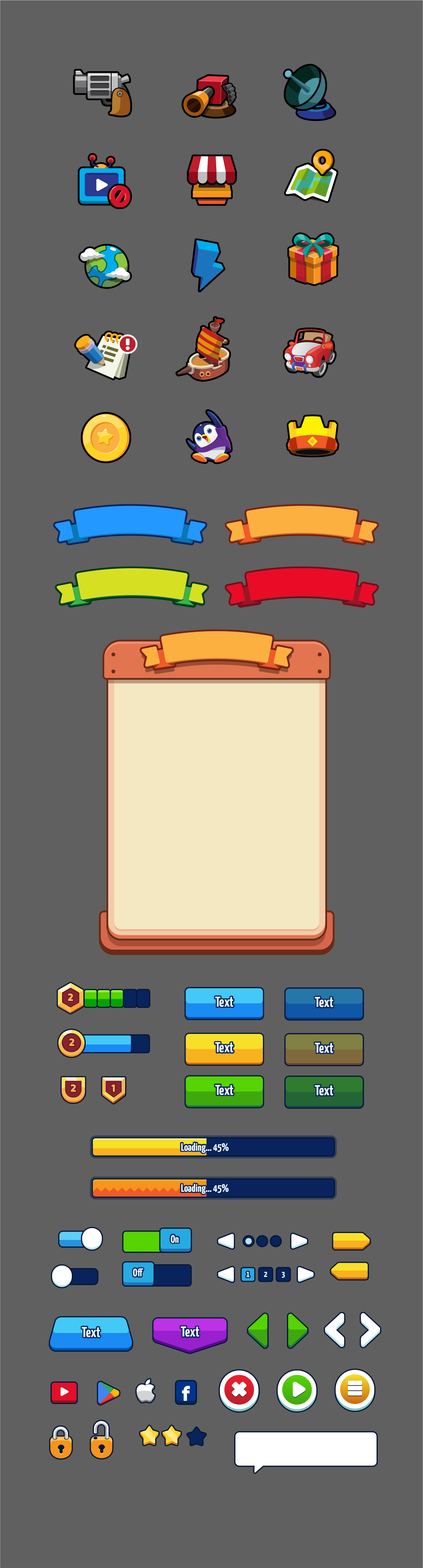
<style>
.page{position:relative;width:423px;height:1568px;background:#606060}
.page>*{position:absolute;margin:0}
.t1{font:10.7px "TiltWarp-Regular";color:#f3b854}
.t2{font:14.3px "YanoneKaffeesatz-Bold";color:#ebfaff}
.t3{font:14.3px "YanoneKaffeesatz-Bold";color:#ebfbff}
.t4{font:10.7px "YanoneKaffeesatz-Bold";color:#ebfaff}
.t5{font:10.7px "YanoneKaffeesatz-Bold";color:#ebfbff}
.t6{font:8.4px "YanoneKaffeesatz-Bold";color:#ebfaff}
.t7{font:8.4px "YanoneKaffeesatz-Bold";color:#ebfbff}
</style>
<div class="page">
<p class="t1" style="left:68px;top:993px;width:5px;height:8px">2</p>
<p class="t1" style="left:68px;top:993px;width:5px;height:8px">2</p>
<p class="t2" style="left:215px;top:996px;width:19px;height:11px">Text</p>
<p class="t3" style="left:215px;top:996px;width:19px;height:11px">Text</p>
<p class="t2" style="left:315px;top:997px;width:19px;height:10px">Text</p>
<p class="t3" style="left:315px;top:997px;width:19px;height:10px">Text</p>
<p class="t2" style="left:215px;top:1042px;width:19px;height:10px">Text</p>
<p class="t3" style="left:215px;top:1042px;width:19px;height:10px">Text</p>
<p class="t2" style="left:315px;top:1042px;width:19px;height:11px">Text</p>
<p class="t3" style="left:315px;top:1042px;width:19px;height:11px">Text</p>
<p class="t1" style="left:71px;top:1084px;width:5px;height:8px">2</p>
<p class="t1" style="left:71px;top:1084px;width:5px;height:8px">2</p>
<p class="t1" style="left:111px;top:1084px;width:4px;height:8px">1</p>
<p class="t1" style="left:111px;top:1084px;width:4px;height:8px">1</p>
<p class="t2" style="left:215px;top:1085px;width:19px;height:10px">Text</p>
<p class="t3" style="left:215px;top:1085px;width:19px;height:10px">Text</p>
<p class="t2" style="left:315px;top:1085px;width:19px;height:10px">Text</p>
<p class="t3" style="left:315px;top:1085px;width:19px;height:10px">Text</p>
<p class="t4" style="left:181px;top:1143px;width:48px;height:10px">Loading... 45%</p>
<p class="t5" style="left:181px;top:1143px;width:48px;height:10px">Loading... 45%</p>
<p class="t4" style="left:181px;top:1184px;width:48px;height:10px">Loading... 45%</p>
<p class="t5" style="left:181px;top:1184px;width:48px;height:10px">Loading... 45%</p>
<p class="t4" style="left:171px;top:1235px;width:8px;height:8px">On</p>
<p class="t5" style="left:171px;top:1235px;width:8px;height:8px">On</p>
<p class="t4" style="left:133px;top:1268px;width:11px;height:9px">Off</p>
<p class="t5" style="left:133px;top:1268px;width:11px;height:9px">Off</p>
<p class="t6" style="left:246px;top:1272px;width:4px;height:5px">1</p>
<p class="t7" style="left:246px;top:1272px;width:4px;height:5px">1</p>
<p class="t6" style="left:264px;top:1272px;width:3px;height:5px">2</p>
<p class="t7" style="left:264px;top:1272px;width:3px;height:5px">2</p>
<p class="t6" style="left:282px;top:1272px;width:3px;height:6px">3</p>
<p class="t7" style="left:282px;top:1272px;width:3px;height:6px">3</p>
<p class="t2" style="left:82px;top:1327px;width:18px;height:10px">Text</p>
<p class="t3" style="left:82px;top:1327px;width:18px;height:10px">Text</p>
<p class="t2" style="left:181px;top:1326px;width:18px;height:11px">Text</p>
<p class="t3" style="left:181px;top:1326px;width:18px;height:11px">Text</p>
</div>
